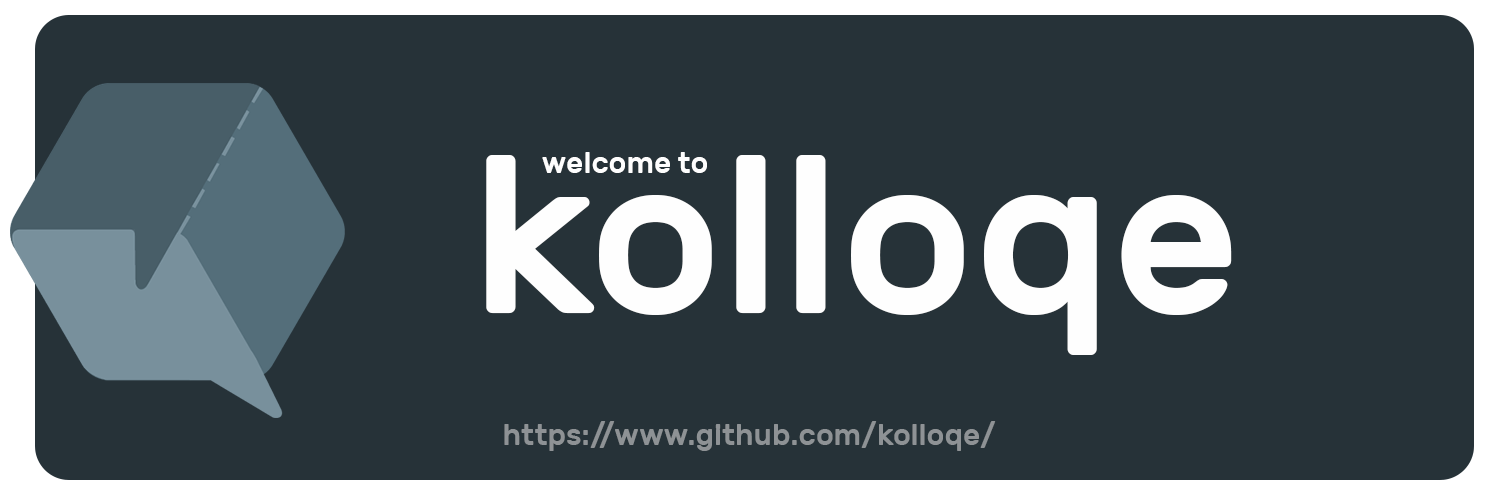
<style>
.page{position:relative;width:1500px;height:500px;background:#263238}
.page>*{position:absolute;margin:0}
.t1{font:223.3px "Rubik-Medium";color:#fefefe}
.t2{font:30px "Rubik-Medium";color:#fefefe}
.t3{font:30px "Rubik-Medium";color:#8e9295}
</style>
<div class="page">
<p class="t1" style="left:486px;top:155px;width:746px;height:200px">kolloqe</p>
<p class="t2" style="left:542px;top:152px;width:165px;height:21px">welcome to</p>
<p class="t3" style="left:504px;top:421px;width:492px;height:30px">https://www.github.com/kolloqe/</p>
</div>
